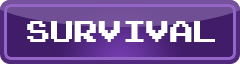
<style>
.page{position:relative;width:240px;height:64px;background:#401c69}
.page>*{position:absolute;margin:0}
.t1{font:24.5px "Emulogic";color:#ffffff}
</style>
<div class="page">
<p class="t1" style="left:27px;top:21px;width:188px;height:21px">survival</p>
</div>
